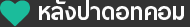
<style>
.page{position:relative;width:190px;height:27px;background:#333333}
.page>*{position:absolute;margin:0}
.t1{font:30px "ThaiSansNeue-ExtraBold";color:#fdfdfd}
</style>
<div class="page">
<p class="t1" style="left:39px;top:0px;width:145px;height:20px">หลังป่าดอทคอม</p>
</div>
